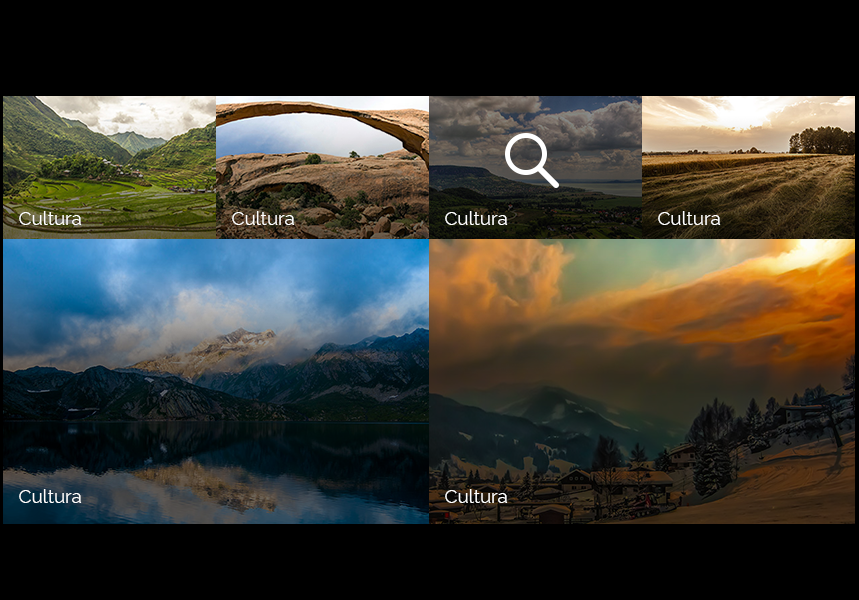
<style>
.page{position:relative;width:859px;height:600px;background:#000000}
.page>*{position:absolute;margin:0}
.t1{font:18.7px "Raleway-Regular";color:#ffffff}
</style>
<div class="page">
<p class="t1" style="left:19px;top:211px;width:63px;height:14px">Cultura</p>
<p class="t1" style="left:232px;top:211px;width:63px;height:14px">Cultura</p>
<p class="t1" style="left:445px;top:211px;width:63px;height:14px">Cultura</p>
<p class="t1" style="left:658px;top:211px;width:63px;height:14px">Cultura</p>
<p class="t1" style="left:19px;top:489px;width:63px;height:14px">Cultura</p>
<p class="t1" style="left:445px;top:489px;width:63px;height:14px">Cultura</p>
</div>
